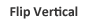
<style>
.page{position:relative;width:88px;height:23px;background:#ffffff}
.page>*{position:absolute;margin:0}
.t1{font:14px "Calibri-Bold";color:#363535}
</style>
<div class="page">
<p class="t1" style="left:10px;top:6px;width:68px;height:13px">Flip Vertical</p>
</div>
